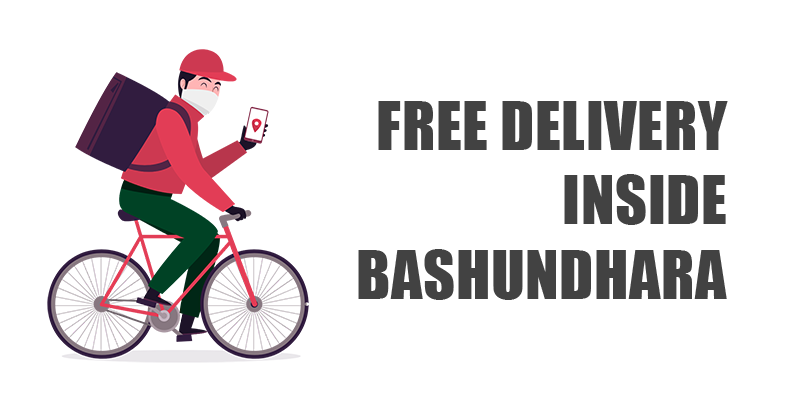
<style>
.page{position:relative;width:800px;height:400px;background:#ffffff}
.page>*{position:absolute;margin:0}
.t1{font:62px "Impact";letter-spacing:0.01em;color:#424242}
</style>
<div class="page">
<p class="t1" style="left:358px;top:101px;width:370px;height:199px;text-align:right">FREE DELIVERY<br>INSIDE<br>BASHUNDHARA</p>
</div>
